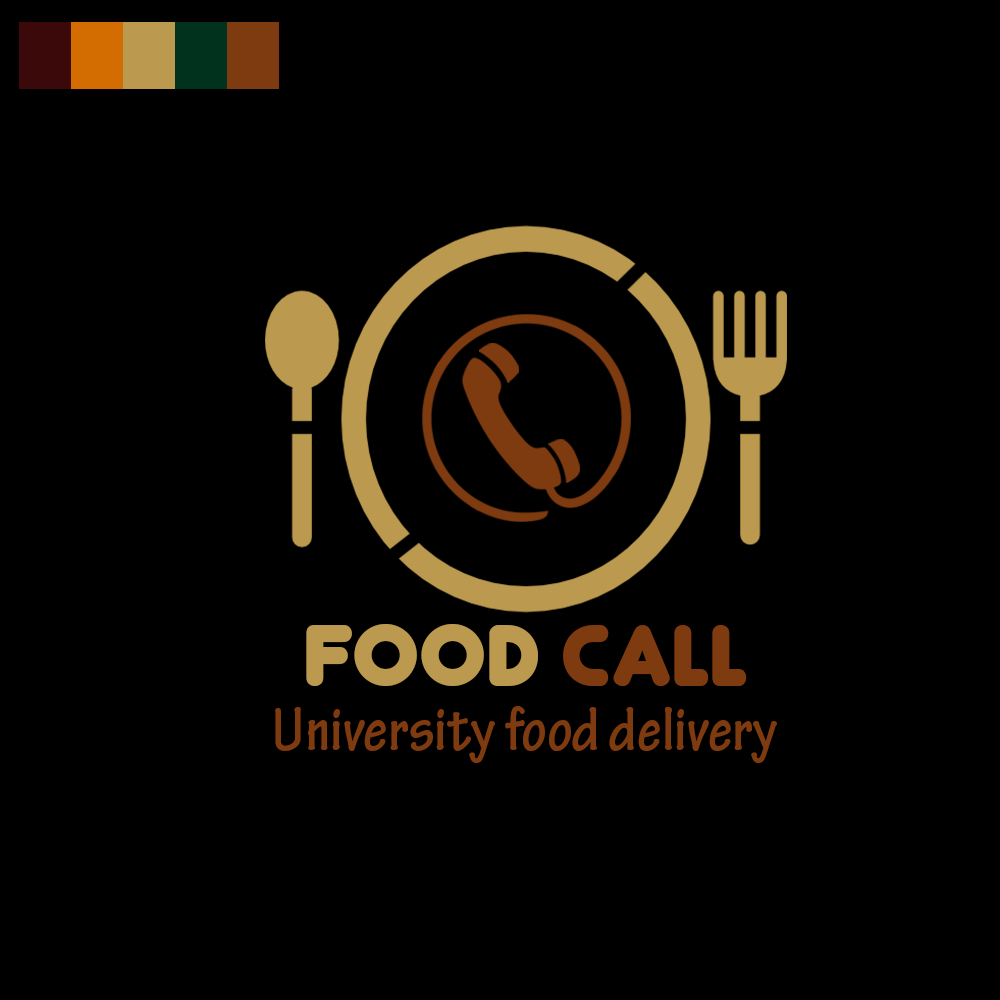
<style>
.page{position:relative;width:1000px;height:1000px;background:#000000}
.page>*{position:absolute;margin:0}
.t1{font:102px "Junegull";color:#bb994e}
.t2{font:102px "Junegull";color:#7f3b10}
.t3{font:66px "TektonPro-BoldCond";color:#7f3b10}
</style>
<div class="page">
<p class="t1" style="left:306px;top:624px;width:441px;height:62px">Food <span class="t2">Call</span></p>
<p class="t3" style="left:275px;top:706px;width:502px;height:57px">University food delivery</p>
</div>
